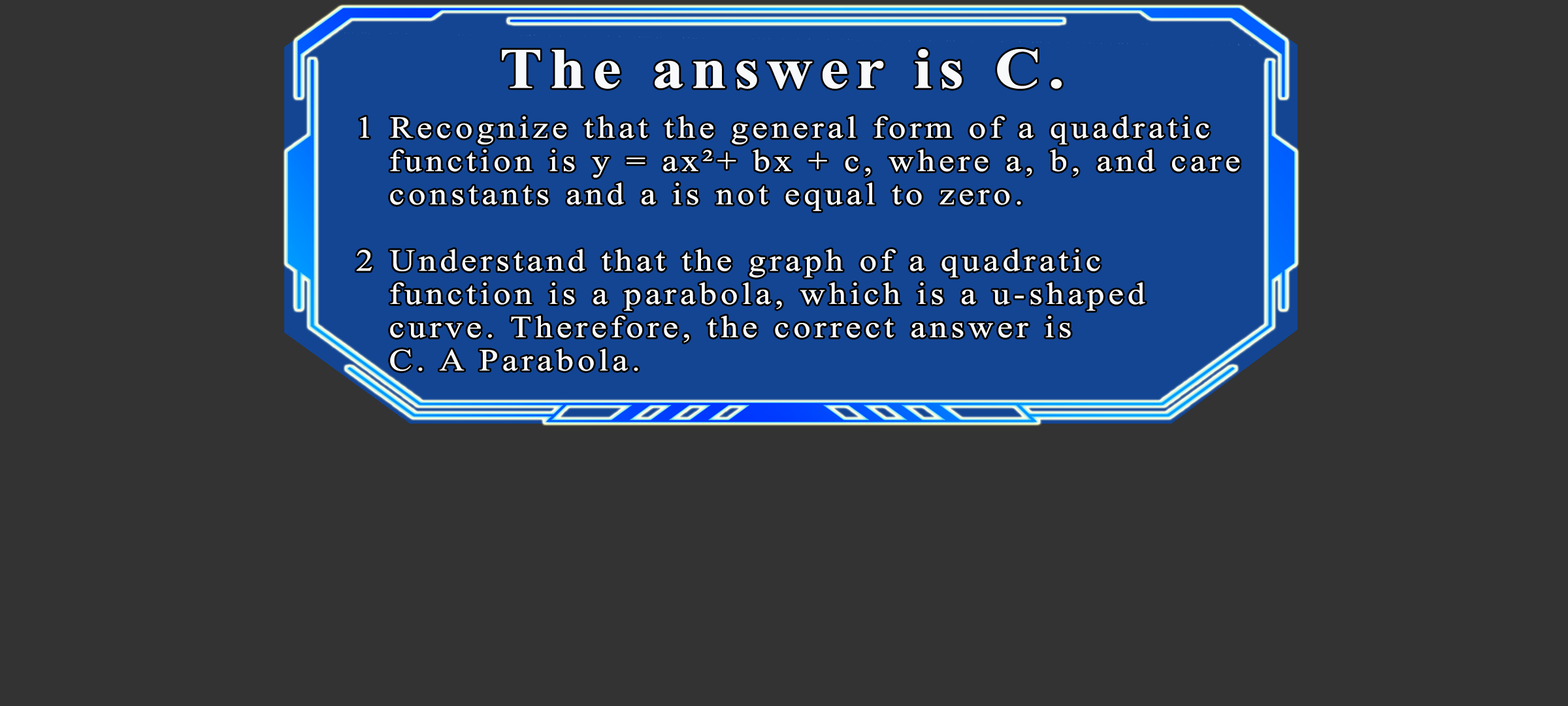
<style>
.page{position:relative;width:1568px;height:706px;background:#333333}
.page>*{position:absolute;margin:0}
.t1{font:57.2px "TimesNewRomanPS-BoldMT";letter-spacing:0.115em;color:#f7f9fb;scale:1.12 1}
.t2{font:30.9px/33.2px "TimesNewRomanPSMT";letter-spacing:0.115em;color:#f7f9fb;scale:1.12 1}
</style>
<div class="page">
<p class="t1" style="left:502px;top:49px;width:560px;height:40px">The answer is C.</p>
<p class="t2" style="left:356px;top:116px;width:884px;height:255px">1 Recognize that the general form of a quadratic<br>  function is y = ax²+ bx + c, where a, b, and care<br>  constants and a is not equal to zero.<br><br>2 Understand that the graph of a quadratic<br>  function is a parabola, which is a u-shaped<br>  curve. Therefore, the correct answer is<br>  C. A Parabola.</p>
</div>
